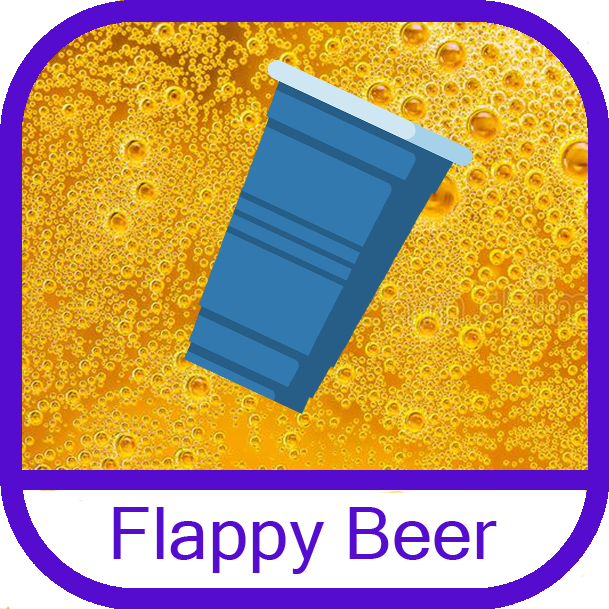
<style>
.page{position:relative;width:609px;height:609px}
.page>*{position:absolute;margin:0}
.t1{font:72px "MicrosoftSansSerif";color:#560cce}
</style>
<div class="page">
<p class="t1" style="left:113px;top:507px;width:384px;height:67px">Flappy Beer</p>
</div>
